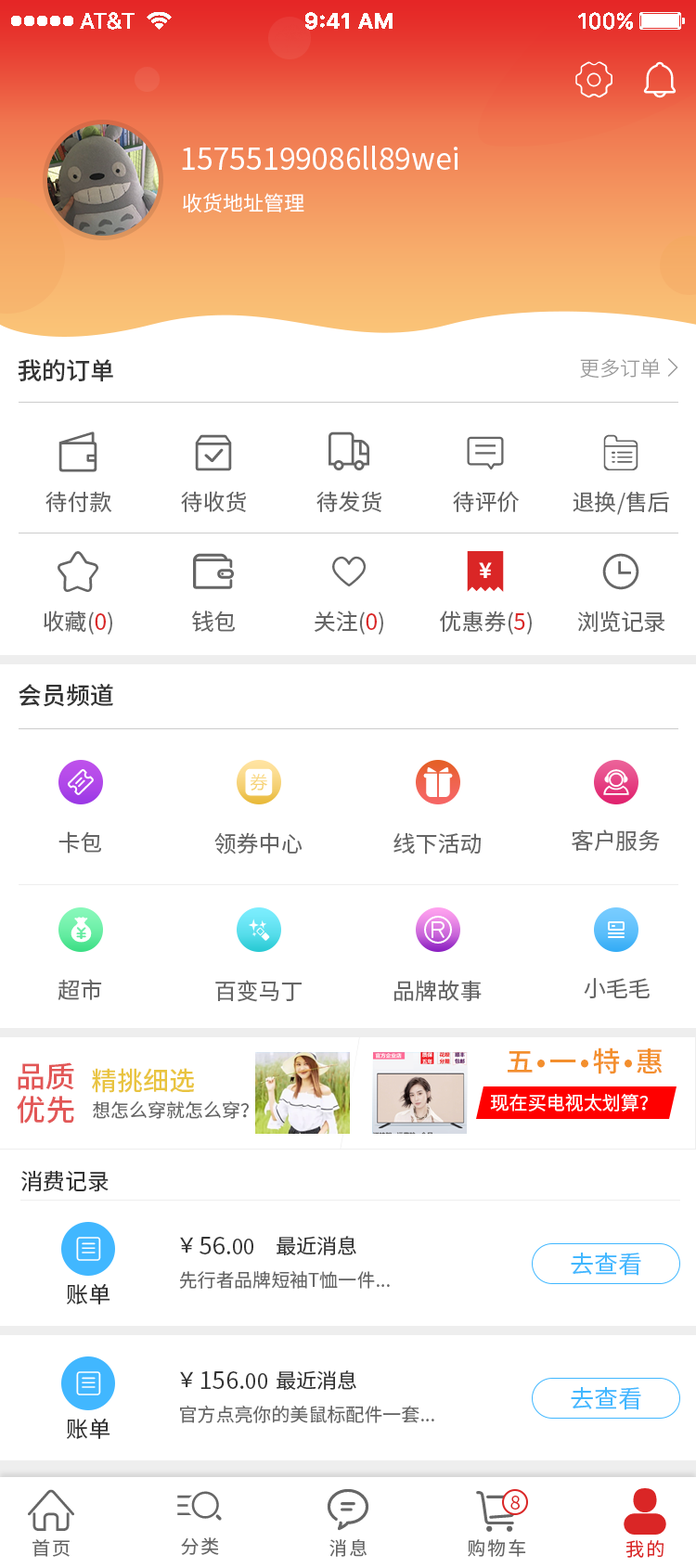
<style>
.page{position:relative;width:696px;height:1568px;background:#ffffff}
.page>*{position:absolute;margin:0}
.t1{font:29.7px "SourceHanSansCN-Regular";color:#ffffff}
.t2{font:20.4px "SourceHanSansCN-Normal";color:#ffffff}
.t3{font:24.1px "SourceHanSansCN-Medium";color:#333333}
.t4{font:20.4px "SourceHanSansCN-Light";color:#999999}
.t5{font:22.3px "SourceHanSansCN-Regular";color:#666666}
.t6{font:22.3px "SourceHanSansCN-Regular";color:#da2626}
.t7{font:27.8px "SourceHanSansCN-Medium";letter-spacing:0.1em;color:#f38f2d}
.t8{font:29.7px/33.4px "SourceHanSansCN-Medium";color:#e25757}
.t9{font:26px "SourceHanSansCN-Medium";color:#e9c440}
.t10{font:18.6px "SourceHanSansCN-Regular";color:#ffffff}
.t11{font:18.6px "SourceHanSansCN-Regular";color:#666666}
.t12{font:22.3px "SourceHanSansCN-Regular";color:#333333}
.t13{font:20.4px "SourceHanSansCN-Regular";color:#333333}
.t14{font:24.1px "SourceHanSansCN-Regular";color:#333333}
.t15{font:24.1px "SourceHanSansCN-Regular";color:#41b7ff}
.t16{font:18.6px "SourceHanSansCN-Normal";color:#da2626}
.t17{font:18.6px "SourceHanSansCN-Regular";letter-spacing:0.1em;color:#666666}
.t18{font:18.6px "SourceHanSansCN-Regular";letter-spacing:0.1em;color:#da2626}
</style>
<div class="page">
<p class="t1" style="left:182px;top:146px;width:275px;height:24px">15755199086ll89wei</p>
<p class="t2" style="left:183px;top:193px;width:121px;height:19px">收货地址管理</p>
<p class="t3" style="left:18px;top:359px;width:95px;height:23px">我的订单</p>
<p class="t4" style="left:580px;top:358px;width:80px;height:20px">更多订单</p>
<p class="t5" style="left:45px;top:491px;width:67px;height:21px">待付款</p>
<p class="t5" style="left:181px;top:491px;width:65px;height:21px">待收货</p>
<p class="t5" style="left:316px;top:491px;width:65px;height:21px">待发货</p>
<p class="t5" style="left:453px;top:491px;width:66px;height:21px">待评价</p>
<p class="t5" style="left:572px;top:491px;width:97px;height:24px">退换/售后</p>
<p class="t5" style="left:44px;top:610px;width:68px;height:25px">收藏(<span class="t6">0</span>)</p>
<p class="t5" style="left:192px;top:610px;width:43px;height:22px">钱包</p>
<p class="t5" style="left:315px;top:610px;width:68px;height:25px">关注(<span class="t6">0</span>)</p>
<p class="t5" style="left:440px;top:610px;width:92px;height:25px">优惠券(<span class="t6">5</span>)</p>
<p class="t5" style="left:577px;top:610px;width:88px;height:23px">浏览记录</p>
<p class="t3" style="left:19px;top:684px;width:94px;height:23px">会员频道</p>
<p class="t5" style="left:58px;top:831px;width:43px;height:23px">卡包</p>
<p class="t5" style="left:214px;top:832px;width:88px;height:23px">领券中心</p>
<p class="t5" style="left:393px;top:832px;width:88px;height:23px">线下活动</p>
<p class="t5" style="left:572px;top:829px;width:88px;height:22px">客户服务</p>
<p class="t5" style="left:584px;top:978px;width:65px;height:20px">小毛毛</p>
<p class="t5" style="left:58px;top:979px;width:44px;height:21px">超市</p>
<p class="t5" style="left:215px;top:980px;width:87px;height:22px">百变马丁</p>
<p class="t5" style="left:393px;top:980px;width:89px;height:22px">品牌故事</p>
<p class="t7" style="left:508px;top:1047px;width:154px;height:27px">五•一•特•惠</p>
<p class="t8" style="left:17px;top:1062px;width:57px;height:62px">品质<br>优先</p>
<p class="t9" style="left:92px;top:1068px;width:102px;height:25px">精挑细选</p>
<p class="t10" style="left:490px;top:1094px;width:158px;height:18px">现在买电视太划算？</p>
<p class="t11" style="left:93px;top:1101px;width:156px;height:18px">想怎么穿就怎么穿？</p>
<p class="t12" style="left:21px;top:1170px;width:88px;height:22px">消费记录</p>
<p class="t13" style="left:180px;top:1237px;width:13px;height:16px">￥</p>
<p class="t14" style="left:199px;top:1237px;width:54px;height:17px">56<span class="t12">.</span><span class="t13">00</span></p>
<p class="t13" style="left:276px;top:1236px;width:80px;height:19px">最近消息</p>
<p class="t15" style="left:571px;top:1253px;width:70px;height:23px">去查看</p>
<p class="t11" style="left:179px;top:1271px;width:211px;height:18px">先行者品牌短袖T恤一件...</p>
<p class="t12" style="left:67px;top:1284px;width:43px;height:21px">账单</p>
<p class="t13" style="left:180px;top:1371px;width:13px;height:17px">￥</p>
<p class="t14" style="left:200px;top:1371px;width:67px;height:18px">156<span class="t12">.</span><span class="t13">00</span></p>
<p class="t13" style="left:276px;top:1370px;width:80px;height:20px">最近消息</p>
<p class="t15" style="left:571px;top:1387px;width:70px;height:23px">去查看</p>
<p class="t11" style="left:180px;top:1405px;width:254px;height:18px">官方点亮你的美鼠标配件一套...</p>
<p class="t12" style="left:67px;top:1419px;width:43px;height:20px">账单</p>
<p class="t16" style="left:510px;top:1496px;width:10px;height:14px">8</p>
<p class="t17" style="left:32px;top:1539px;width:38px;height:18px">首页</p>
<p class="t17" style="left:181px;top:1537px;width:38px;height:18px">分类</p>
<p class="t17" style="left:329px;top:1539px;width:37px;height:18px">消息</p>
<p class="t17" style="left:468px;top:1539px;width:58px;height:18px">购物车</p>
<p class="t18" style="left:625px;top:1540px;width:38px;height:18px">我的</p>
</div>
